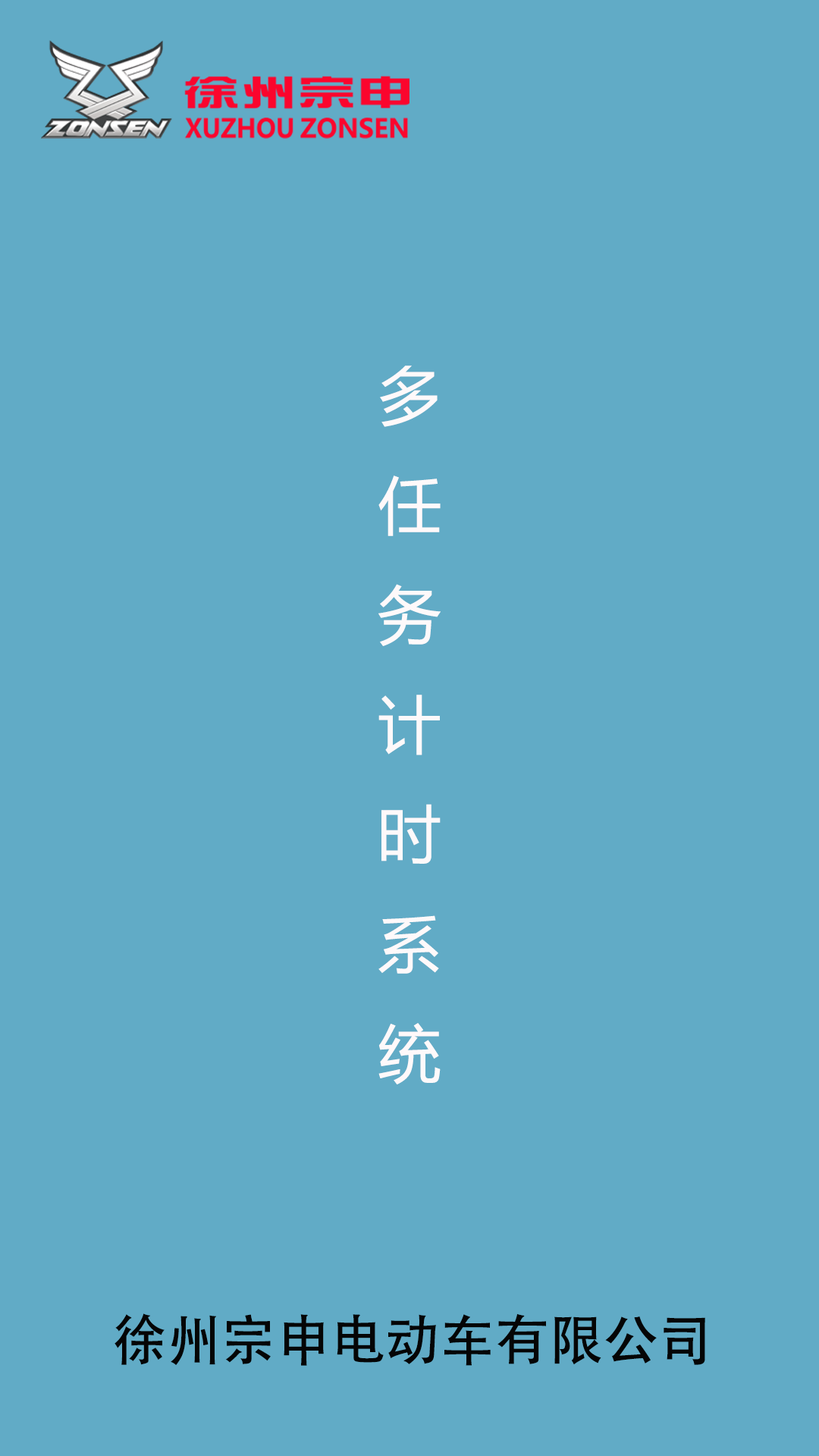
<style>
.page{position:relative;width:819px;height:1456px;background:#61abc6}
.page>*{position:absolute;margin:0}
.t1{font:62.7px "MicrosoftYaHei";color:#fef9fa}
.t2{font:54.6px "AdobeHeitiStd-Regular";color:#050505}
</style>
<div class="page">
<p class="t1" style="left:378px;top:366px;width:63px;height:718px;text-align:center">多<br>任<br>务<br>计<br>时<br>系<br>统</p>
<p class="t2" style="left:115px;top:1313px;width:590px;height:53px">徐州宗申电动车有限公司</p>
</div>
